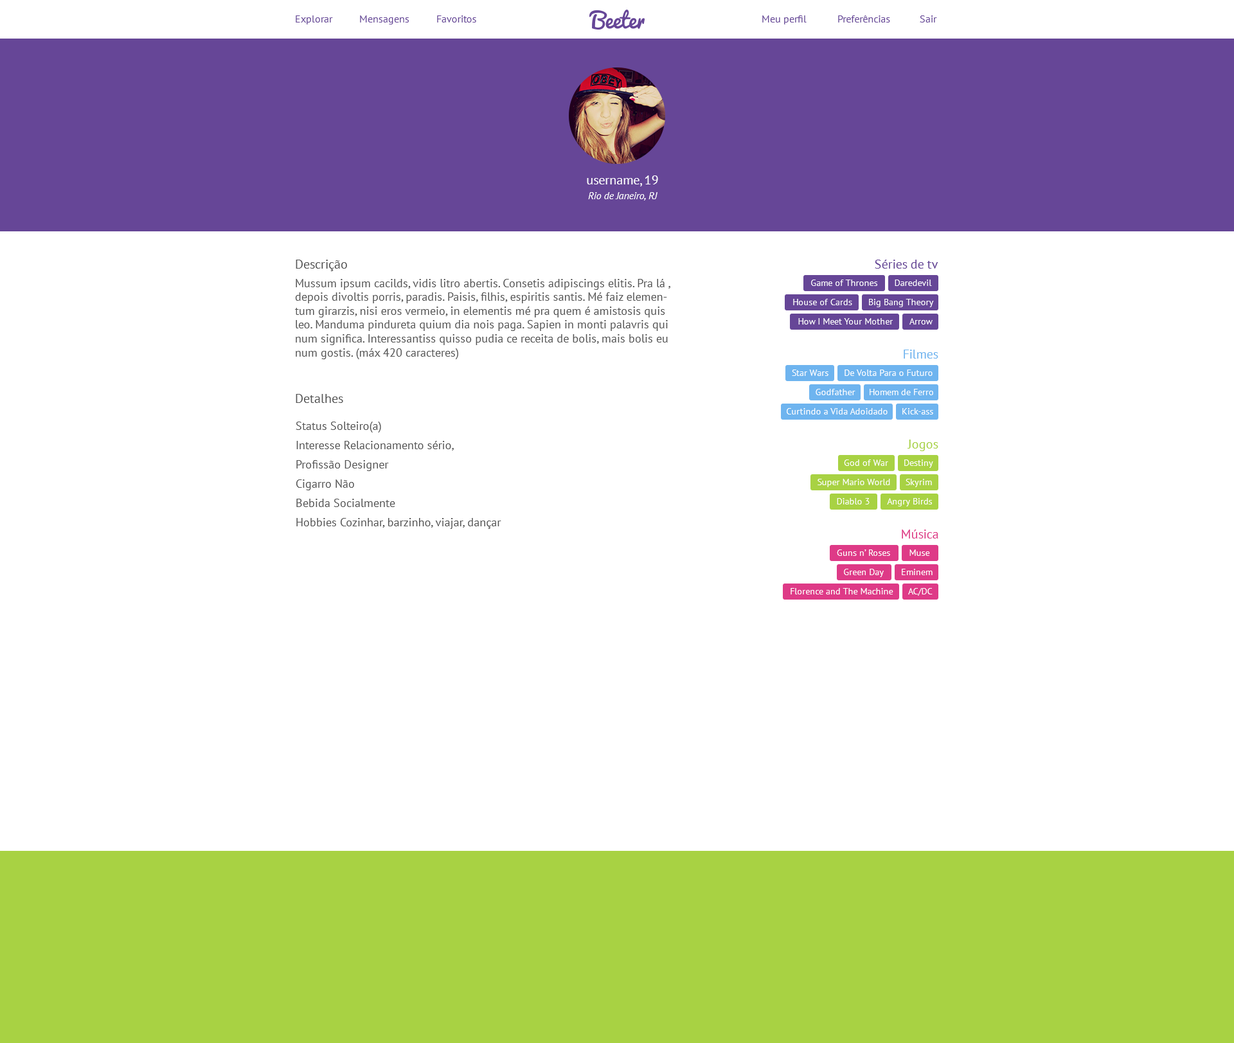
<style>
.page{position:relative;width:1234px;height:1043px;background:#ffffff}
.page>*{position:absolute;margin:0}
.t1{font:10.3px "PTSans-Regular";color:#664697}
.t2{font:12.9px "PTSans-Regular";color:#ffffff}
.t3{font:10.3px "PTSans-Italic";color:#ffffff}
.t4{font:12.9px "PTSans-Regular";color:#555555}
.t5{font:12.9px "PTSans-Regular";color:#664697}
.t6{font:11.6px "PTSans-Regular";color:#555555}
.t7{font:9px "PTSans-Regular";color:#ffffff}
.t8{font:12.9px "PTSans-Regular";color:#6eb4ef}
.t9{font:11.6px/19.3px "PTSans-Regular";color:#555555}
.t10{font:12.9px "PTSans-Regular";color:#a8d243}
.t11{font:12.9px "PTSans-Regular";color:#de3a87}
</style>
<div class="page">
<p class="t1" style="left:296px;top:15px;width:37px;height:9px">Explorar</p>
<p class="t1" style="left:360px;top:15px;width:49px;height:9px">Mensagens</p>
<p class="t1" style="left:437px;top:15px;width:39px;height:7px">Favoritos</p>
<p class="t1" style="left:762px;top:15px;width:45px;height:9px">Meu perfil</p>
<p class="t1" style="left:838px;top:15px;width:52px;height:7px">Preferências</p>
<p class="t1" style="left:920px;top:15px;width:17px;height:7px">Sair</p>
<p class="t2" style="left:587px;top:176px;width:71px;height:10px">username, 19</p>
<p class="t3" style="left:588px;top:192px;width:70px;height:9px">Rio de Janeiro, RJ</p>
<p class="t4" style="left:296px;top:260px;width:51px;height:11px">Descrição</p>
<p class="t5" style="left:875px;top:260px;width:64px;height:9px">Séries de tv</p>
<p class="t6" style="left:295px;top:279px;width:375px;height:80px">Mussum ipsum cacilds, vidis litro abertis. Consetis adipiscings elitis. Pra lá , depois divoltis porris, paradis. Paisis, filhis, espiritis santis. Mé faiz elementum girarzis, nisi eros vermeio, in elementis mé pra quem é amistosis quis leo. Manduma pindureta quium dia nois paga. Sapien in monti palavris qui num significa. Interessantiss quisso pudia ce receita de bolis, mais bolis eu num gostis. (máx 420 caracteres)</p>
<p class="t7" style="left:811px;top:280px;width:67px;height:6px">Game of Thrones</p>
<p class="t7" style="left:895px;top:280px;width:37px;height:6px">Daredevil</p>
<p class="t7" style="left:793px;top:299px;width:59px;height:6px">House of Cards</p>
<p class="t7" style="left:869px;top:299px;width:65px;height:8px">Big Bang Theory</p>
<p class="t7" style="left:798px;top:318px;width:95px;height:7px">How I Meet Your Mother</p>
<p class="t7" style="left:910px;top:318px;width:23px;height:7px">Arrow</p>
<p class="t8" style="left:904px;top:350px;width:35px;height:9px">Filmes</p>
<p class="t7" style="left:792px;top:370px;width:37px;height:6px">Star Wars</p>
<p class="t7" style="left:845px;top:370px;width:88px;height:6px">De Volta Para o Futuro</p>
<p class="t7" style="left:816px;top:389px;width:40px;height:6px">Godfather</p>
<p class="t7" style="left:870px;top:389px;width:63px;height:6px">Homem de Ferro</p>
<p class="t4" style="left:296px;top:394px;width:47px;height:9px">Detalhes</p>
<p class="t7" style="left:787px;top:408px;width:101px;height:7px">Curtindo a Vida Adoidado</p>
<p class="t7" style="left:903px;top:408px;width:30px;height:7px">Kick-ass</p>
<p class="t9" style="left:296px;top:422px;width:205px;height:107px">Status Solteiro(a)<br>Interesse Relacionamento sério,<br>Profissão Designer<br>Cigarro Não<br>Bebida Socialmente<br>Hobbies Cozinhar, barzinho, viajar, dançar</p>
<p class="t10" style="left:908px;top:440px;width:31px;height:11px">Jogos</p>
<p class="t7" style="left:844px;top:460px;width:44px;height:6px">God of War</p>
<p class="t7" style="left:905px;top:460px;width:28px;height:8px">Destiny</p>
<p class="t7" style="left:818px;top:479px;width:72px;height:8px">Super Mario World</p>
<p class="t7" style="left:906px;top:479px;width:26px;height:8px">Skyrim</p>
<p class="t7" style="left:837px;top:498px;width:33px;height:7px">Diablo 3</p>
<p class="t7" style="left:887px;top:498px;width:45px;height:9px">Angry Birds</p>
<p class="t11" style="left:902px;top:530px;width:37px;height:9px">Música</p>
<p class="t7" style="left:837px;top:550px;width:53px;height:6px">Guns n’ Roses</p>
<p class="t7" style="left:910px;top:550px;width:20px;height:6px">Muse</p>
<p class="t7" style="left:844px;top:569px;width:40px;height:8px">Green Day</p>
<p class="t7" style="left:902px;top:569px;width:31px;height:6px">Eminem</p>
<p class="t7" style="left:791px;top:588px;width:103px;height:7px">Florence and The Machine</p>
<p class="t7" style="left:908px;top:588px;width:25px;height:8px">AC/DC</p>
</div>
